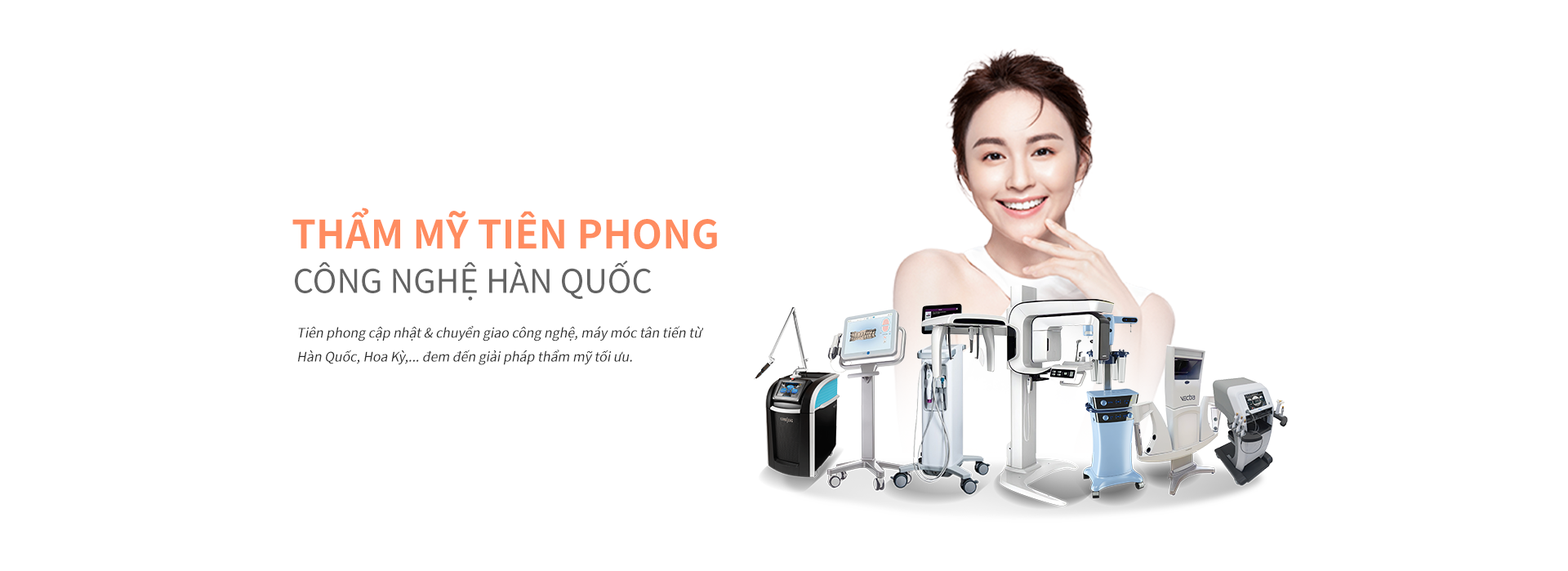
<style>
.page{position:relative;width:1568px;height:571px;background:#ffffff}
.page>*{position:absolute;margin:0}
.t1{font:39.2px "NotoSansKR-Bold";color:#ff8c60;text-transform:uppercase}
.t2{font:32.7px "NotoSansKR-Regular";color:#636363;text-transform:uppercase}
.t3{font:13.1px/23.8px "NotoSansKR-Regular";color:#2a2a2a;font-style:italic}
</style>
<div class="page">
<p class="t1" style="left:292px;top:207px;width:425px;height:42px">THẨM MỸ TIÊN PHONG</p>
<p class="t2" style="left:295px;top:260px;width:357px;height:41px">công nghệ HÀN QUỐC</p>
<p class="t3" style="left:297px;top:326px;width:406px;height:39px">Tiên phong cập nhật &amp; chuyển giao công nghệ, máy móc tân tiến từ Hàn Quốc, Hoa Kỳ,... đem đến giải pháp thẩm mỹ tối ưu.</p>
</div>
